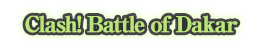
<style>
.page{position:relative;width:263px;height:47px;background:#ffffff}
.page>*{position:absolute;margin:0}
.t1{font:22px "RyuminPro-ExBold";letter-spacing:-0.08em;color:#bae57c;font-weight:bold}
</style>
<div class="page">
<p class="t1" style="left:25px;top:15px;width:213px;height:18px">Clash! Battle of Dakar</p>
</div>
